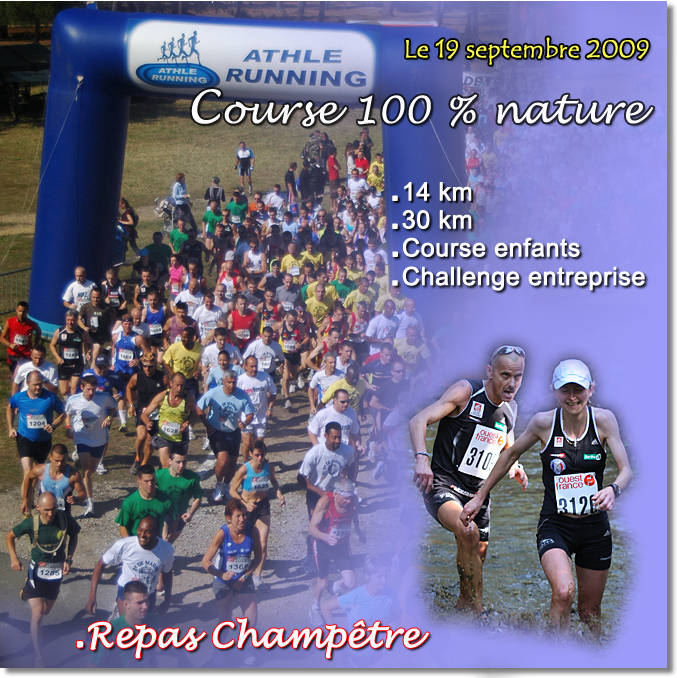
<style>
.page{position:relative;width:677px;height:678px}
.page>*{position:absolute;margin:0}
.t1{font:25px "TempusSansITC";color:#fdfb4e;font-weight:bold}
.t2{font:37.5px "LucidaHandwriting-Italic";color:#fbfbfd;font-weight:bold}
.t3{font:45.8px "LucidaHandwriting-Italic";color:#fbfbfd;font-weight:bold}
.t4{font:25px "ArialMT";color:#fbfbfd;font-weight:bold}
.t5{font:41.7px "ArialMT";color:#fbfbfd;font-weight:bold}
.t6{font:33.3px "LucidaHandwriting-Italic";color:#fbfbfd;font-weight:bold}
.t7{font:41.7px "LucidaHandwriting-Italic";color:#fbfbfd;font-weight:bold}
</style>
<div class="page">
<p class="t1" style="left:406px;top:37px;width:243px;height:28px">Le 19 septembre 2009</p>
<p class="t2" style="left:191px;top:89px;width:463px;height:38px"><span class="t3">C</span>ourse 100 % nature</p>
<p class="t4" style="left:392px;top:182px;width:80px;height:19px"><span class="t5">.</span>14 km</p>
<p class="t4" style="left:392px;top:210px;width:80px;height:19px"><span class="t5">.</span>30 km</p>
<p class="t4" style="left:392px;top:237px;width:188px;height:20px"><span class="t5">.</span>Course enfants</p>
<p class="t4" style="left:392px;top:266px;width:253px;height:25px"><span class="t5">.</span>Challenge entreprise</p>
<p class="t6" style="left:76px;top:618px;width:353px;height:41px"><span class="t7">.</span>Repas Champêtre</p>
</div>
